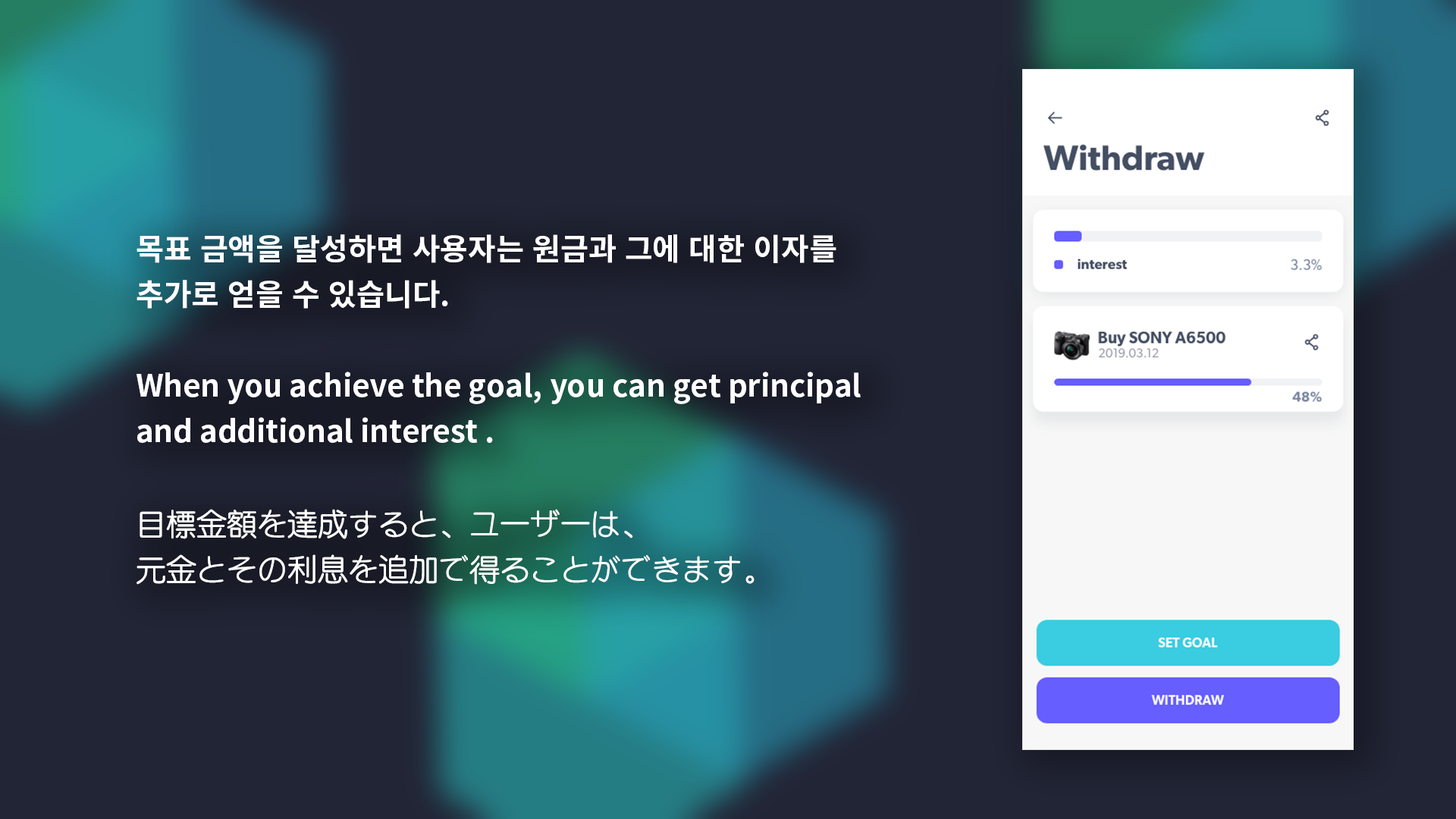
<style>
.page{position:relative;width:1456px;height:819px;background:#222536}
.page>*{position:absolute;margin:0}
.t1{font:30.3px/45.5px "NotoSansKR-Bold";color:#ffffff}
.t2{font:30.3px/45.5px "STYuanti-SC-Regular";color:#ffffff}
</style>
<div class="page">
<p class="t1" style="left:136px;top:234px;width:725px;height:351px">목표 금액을 달성하면 사용자는 원금과 그에 대한 이자를 <br>추가로 얻을 수 있습니다.<br><br>When you achieve the goal, you can get principal<br>and additional interest .<br><br><span class="t2">目標金額を達成すると、ユーザーは、<br>元金とその利息を追加で得ることができます。</span></p>
</div>
